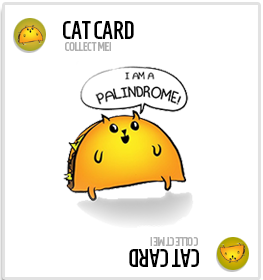
<style>
.page{position:relative;width:263px;height:280px;background:#ffffff}
.page>*{position:absolute;margin:0}
.t1{font:25px "HomenajeMod-Bold";color:#000000;scale:0.87 1}
.t2{font:12.5px "HomenajeMod-Bold";color:#afafaf;scale:0.87 1}
</style>
<div class="page">
<p class="t1" style="left:63px;top:21px;width:71px;height:18px">CAT CARD</p>
<p class="t2" style="left:65px;top:42px;width:46px;height:9px">!COLLECT ME</p>
<p class="t2" style="left:150px;top:237px;width:48px;height:9px;rotate:180deg">!COLLECT ME</p>
<p class="t1" style="left:129px;top:249px;width:70px;height:18px;rotate:180deg">CAT CARD</p>
</div>
